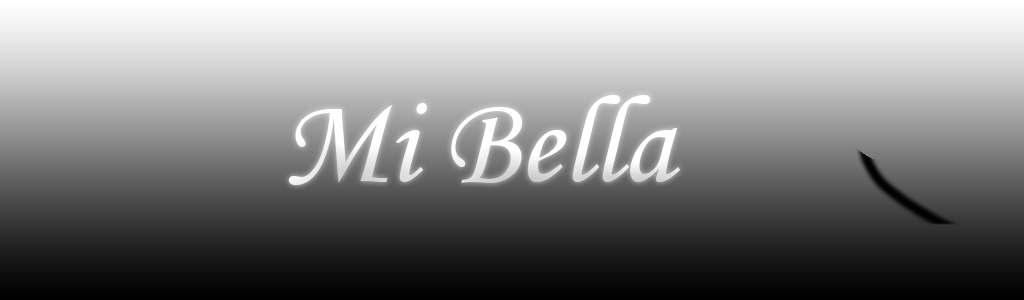
<style>
.page{position:relative;width:1024px;height:300px}
.page>*{position:absolute;margin:0}
.t1{font:125px "MonotypeCorsiva";color:#ffffff}
</style>
<div class="page">
<p class="t1" style="left:288px;top:95px;width:393px;height:90px">Mi Bella</p>
</div>
